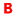
<style>
.page{position:relative;width:16px;height:16px;background:#ffffff}
.page>*{position:absolute;margin:0}
.t1{font:15px "Univers-Bold";letter-spacing:-0.04em;color:#ff0000}
</style>
<div class="page">
<p class="t1" style="left:4px;top:3px;width:9px;height:11px">B</p>
</div>
